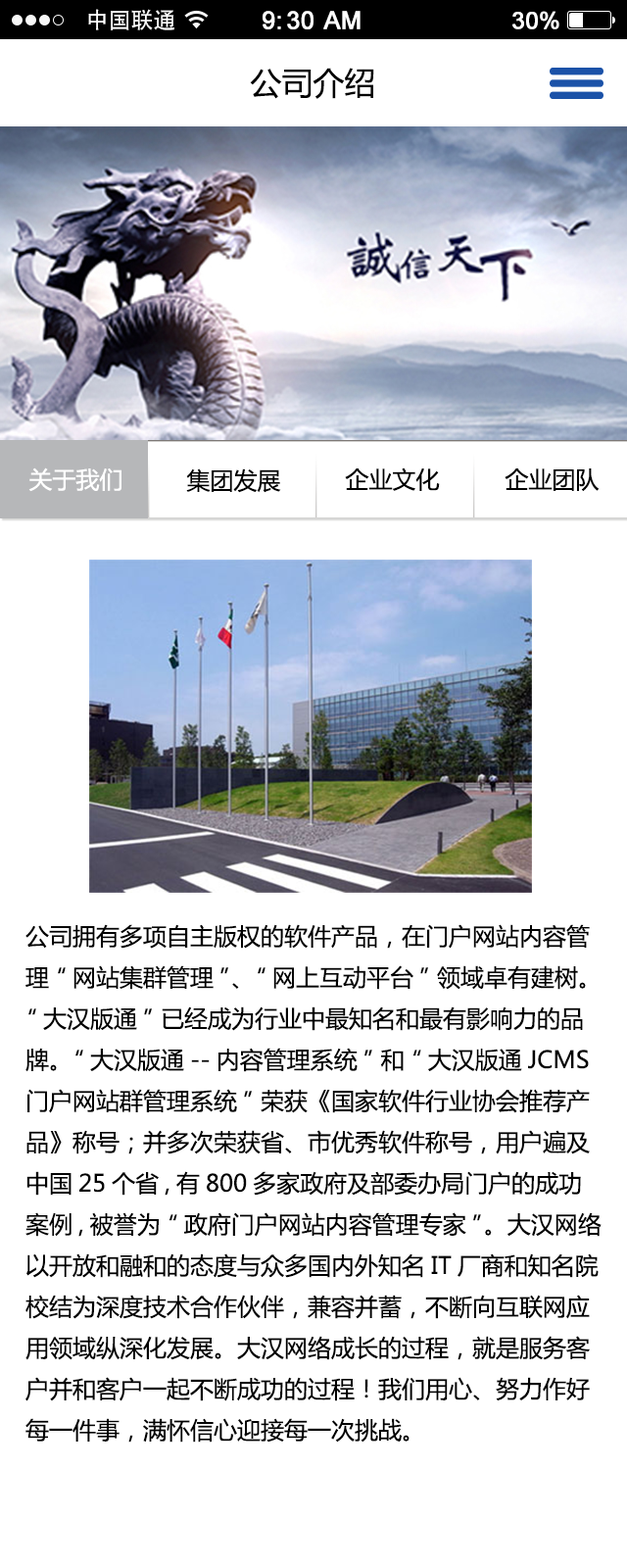
<style>
.page{position:relative;width:627px;height:1568px;background:#ffffff}
.page>*{position:absolute;margin:0}
.t1{font:22.5px "AdobeHeitiStd-Regular";color:#ffffff}
.t2{font:24.5px "ArialMT";color:#ffffff;font-weight:bold}
.t3{font:23.5px "ArialMT";color:#ffffff;font-weight:bold}
.t4{font:31.4px "MicrosoftYaHei";color:#000000}
.t5{font:23.5px "MicrosoftYaHei";color:#ffffff}
.t6{font:23.5px "MicrosoftYaHei";color:#000000}
</style>
<div class="page">
<p class="t1" style="left:88px;top:9px;width:86px;height:21px">中国联通</p>
<p class="t1" style="left:88px;top:9px;width:86px;height:21px">中国联通</p>
<p class="t2" style="left:263px;top:11px;width:98px;height:18px">9:30 AM</p>
<p class="t2" style="left:263px;top:11px;width:98px;height:18px">9:30 AM</p>
<p class="t3" style="left:513px;top:11px;width:47px;height:18px">30%</p>
<p class="t3" style="left:513px;top:11px;width:47px;height:18px">30%</p>
<p class="t4" style="left:250px;top:68px;width:124px;height:31px">公司介绍</p>
<p class="t5" style="left:28px;top:467px;width:94px;height:25px">关于我们</p>
<p class="t6" style="left:186px;top:468px;width:95px;height:25px">集团发展</p>
<p class="t6" style="left:345px;top:467px;width:95px;height:24px">企业文化</p>
<p class="t6" style="left:505px;top:468px;width:95px;height:23px">企业团队</p>
<p class="t6" style="left:25px;top:924px;width:577px;height:519px">公司拥有多项自主版权的软件产品，在门户网站内容管<br>理“网站集群管理”、“网上互动平台”领域卓有建树。<br>“大汉版通”已经成为行业中最知名和最有影响力的品<br>牌。“大汉版通--内容管理系统”和“大汉版通JCMS<br>门户网站群管理系统”荣获《国家软件行业协会推荐产<br>品》称号；并多次荣获省、市优秀软件称号，用户遍及<br>中国25个省,有800多家政府及部委办局门户的成功<br>案例,被誉为“政府门户网站内容管理专家”。大汉网络<br>以开放和融和的态度与众多国内外知名IT厂商和知名院<br>校结为深度技术合作伙伴，兼容并蓄，不断向互联网应<br>用领域纵深化发展。大汉网络成长的过程，就是服务客<br>户并和客户一起不断成功的过程！我们用心、努力作好<br>每一件事，满怀信心迎接每一次挑战。</p>
</div>
